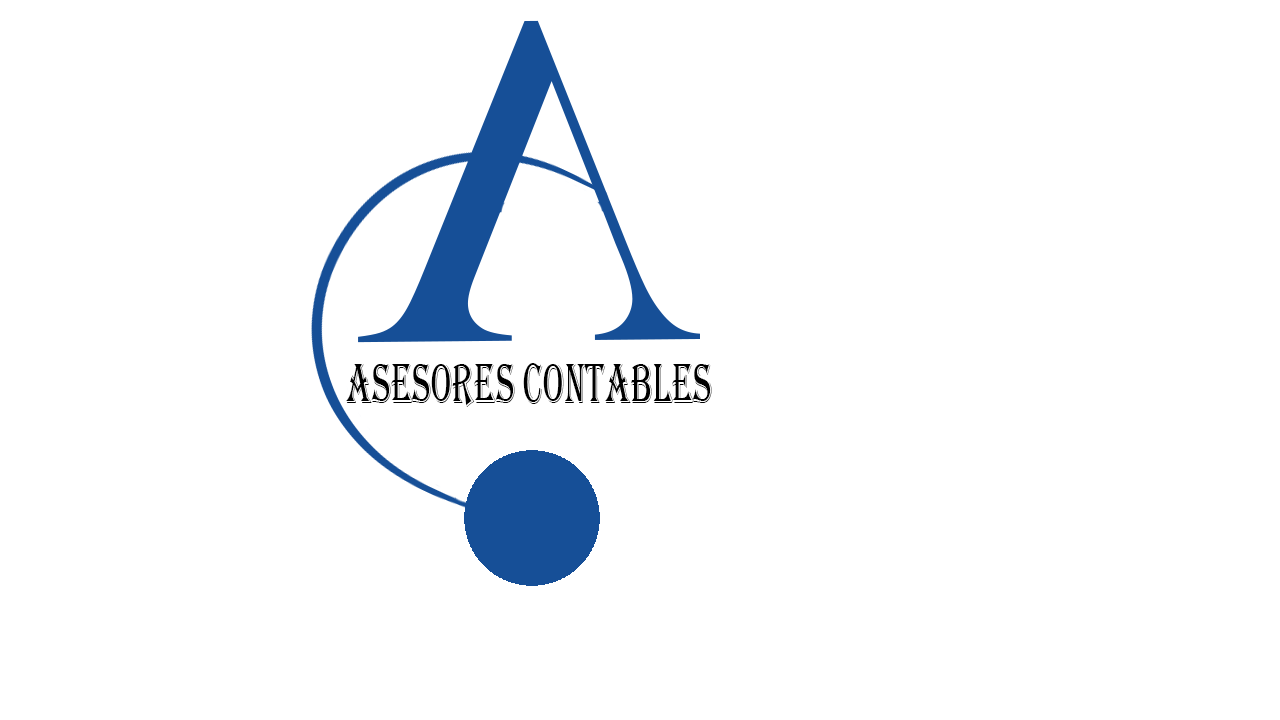
<style>
.page{position:relative;width:1280px;height:720px;background:#ffffff}
.page>*{position:absolute;margin:0}
.t1{font:58.3px "Algerian";color:#000000;scale:0.59 1}
</style>
<div class="page">
<p class="t1" style="left:346px;top:363px;width:366px;height:44px">asesores contables</p>
</div>
